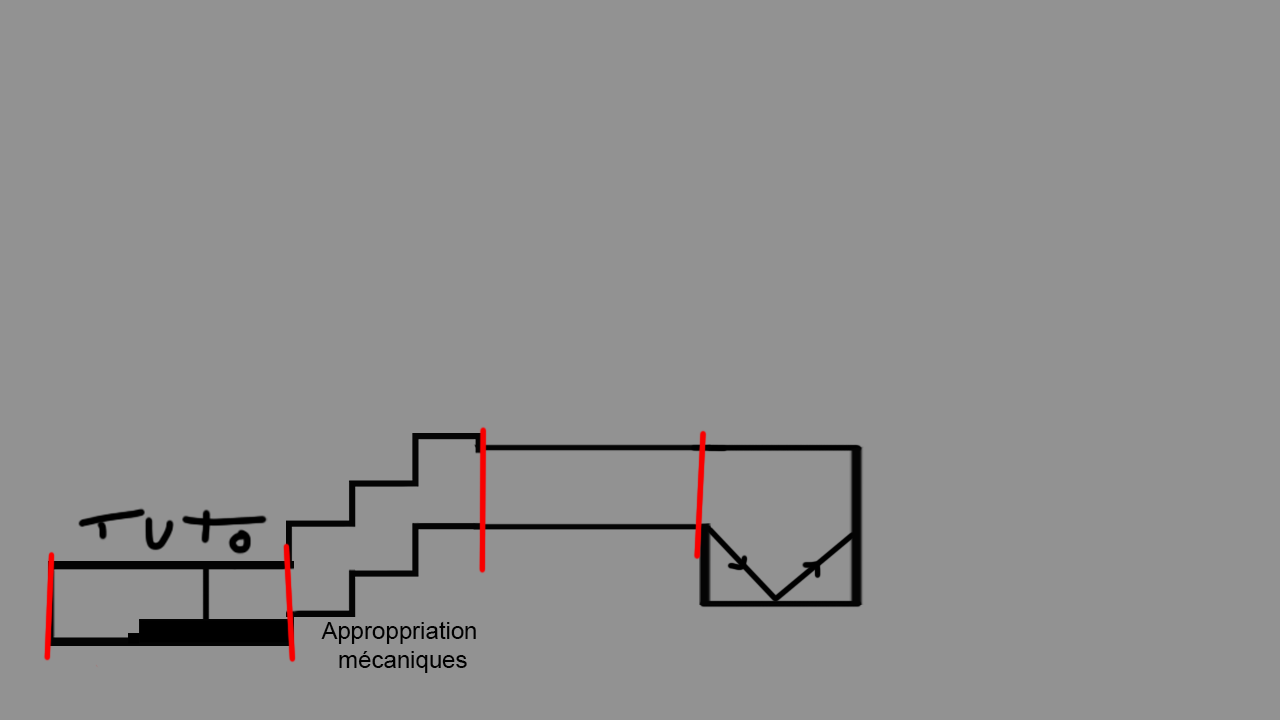
<style>
.page{position:relative;width:1280px;height:720px;background:#929292}
.page>*{position:absolute;margin:0}
.t1{font:24px "ArialMT";color:#000000}
</style>
<div class="page">
<p class="t1" style="left:321px;top:621px;width:155px;height:52px;text-align:center">Approppriation <br>mécaniques</p>
</div>
